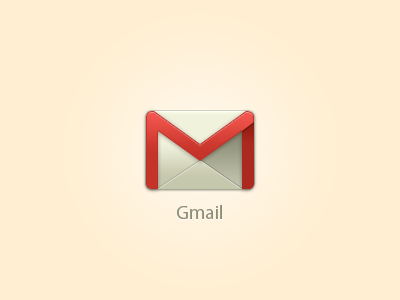
<style>
.page{position:relative;width:400px;height:300px;background:#ffeed1}
.page>*{position:absolute;margin:0}
.t1{font:19.4px "MyriadPro-Regular";color:#8c8d77}
</style>
<div class="page">
<p class="t1" style="left:177px;top:205px;width:45px;height:14px">Gmail</p>
</div>
